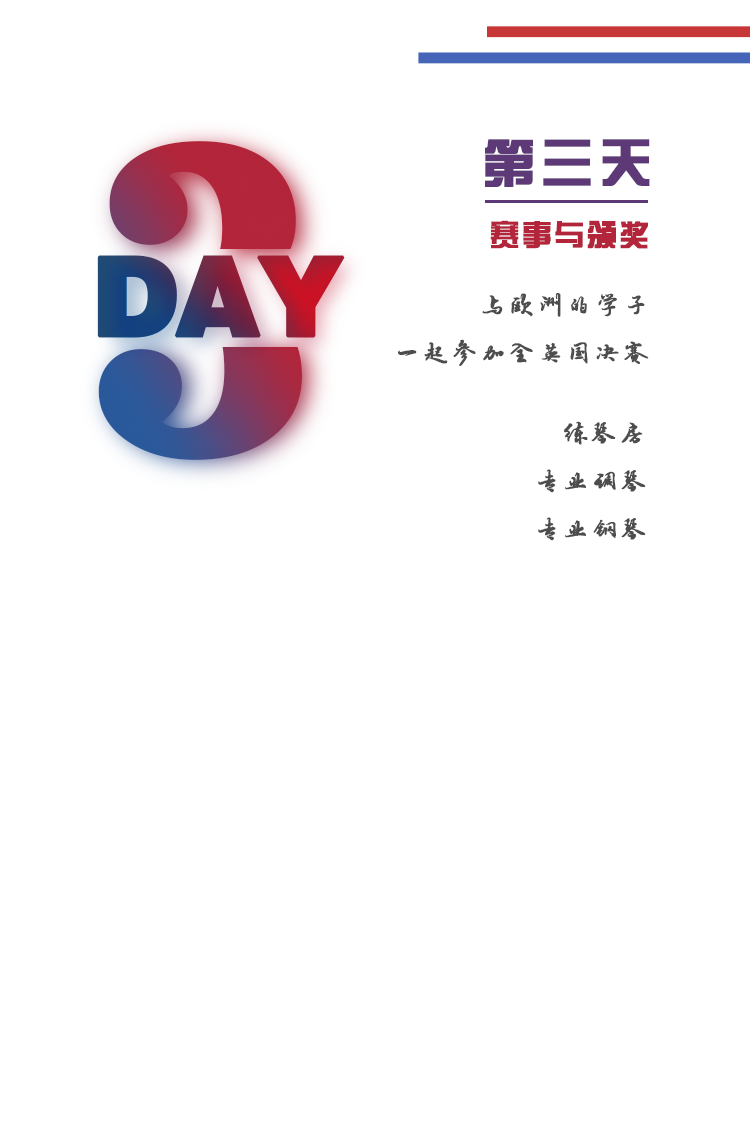
<style>
.page{position:relative;width:750px;height:1140px;background:#ffffff}
.page>*{position:absolute;margin:0}
.t1{font:432.9px "News706BT-BoldC";letter-spacing:-0.05em;font-weight:bold}
.t2{font:52px "FZZYJW--GB1-0";letter-spacing:0.1em;color:#5d3a77;font-weight:bold}
.t3{font:30px "FZZYJW--GB1-0";letter-spacing:0.05em;color:#b3253a;font-weight:bold}
.t4{font:110px "FZCCHJW--GB1-0";letter-spacing:-0.05em;font-weight:bold}
.t5{font:26px/48px "·½ÕýÂÀ½¨µÂ×ÖÌå";letter-spacing:0.075em;color:#4d4d4d;font-weight:bold}
</style>
<div class="page">
<p class="t1" style="left:98px;top:141px;width:204px;height:319px">3</p>
<p class="t2" style="left:485px;top:139px;width:165px;height:48px">第三天</p>
<p class="t3" style="left:490px;top:220px;width:158px;height:29px">赛事与颁奖</p>
<p class="t4" style="left:97px;top:255px;width:248px;height:83px">DAY</p>
<p class="t5" style="left:398px;top:293px;width:251px;height:73px">与欧洲的学子<br>一起参加全英国决赛</p>
<p class="t5" style="left:538px;top:421px;width:108px;height:120px">练琴房<br>专业调琴<br>专业钢琴</p>
</div>
